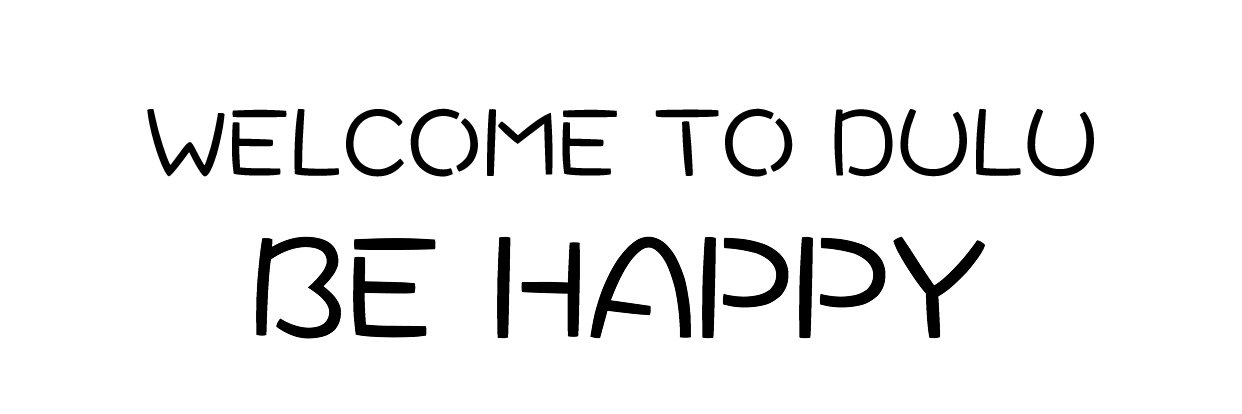
<style>
.page{position:relative;width:1242px;height:414px;background:#ffffff}
.page>*{position:absolute;margin:0}
.t1{font:100px "DFWaWaSC-W5";color:#000000;text-transform:uppercase}
.t2{font:150px "DFWaWaSC-W5";color:#000000;text-transform:uppercase}
</style>
<div class="page">
<p class="t1" style="left:147px;top:108px;width:947px;height:69px">welcome TO DULU</p>
<p class="t2" style="left:256px;top:236px;width:729px;height:103px">BE Happy</p>
</div>
